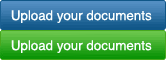
<style>
.page{position:relative;width:166px;height:60px}
.page>*{position:absolute;margin:0}
.t1{font:13.3px/30px "Helvetica";color:#fbffff}
</style>
<div class="page">
<p class="t1" style="left:11px;top:10px;width:141px;height:43px">Upload your documents<br>Upload your documents</p>
</div>
